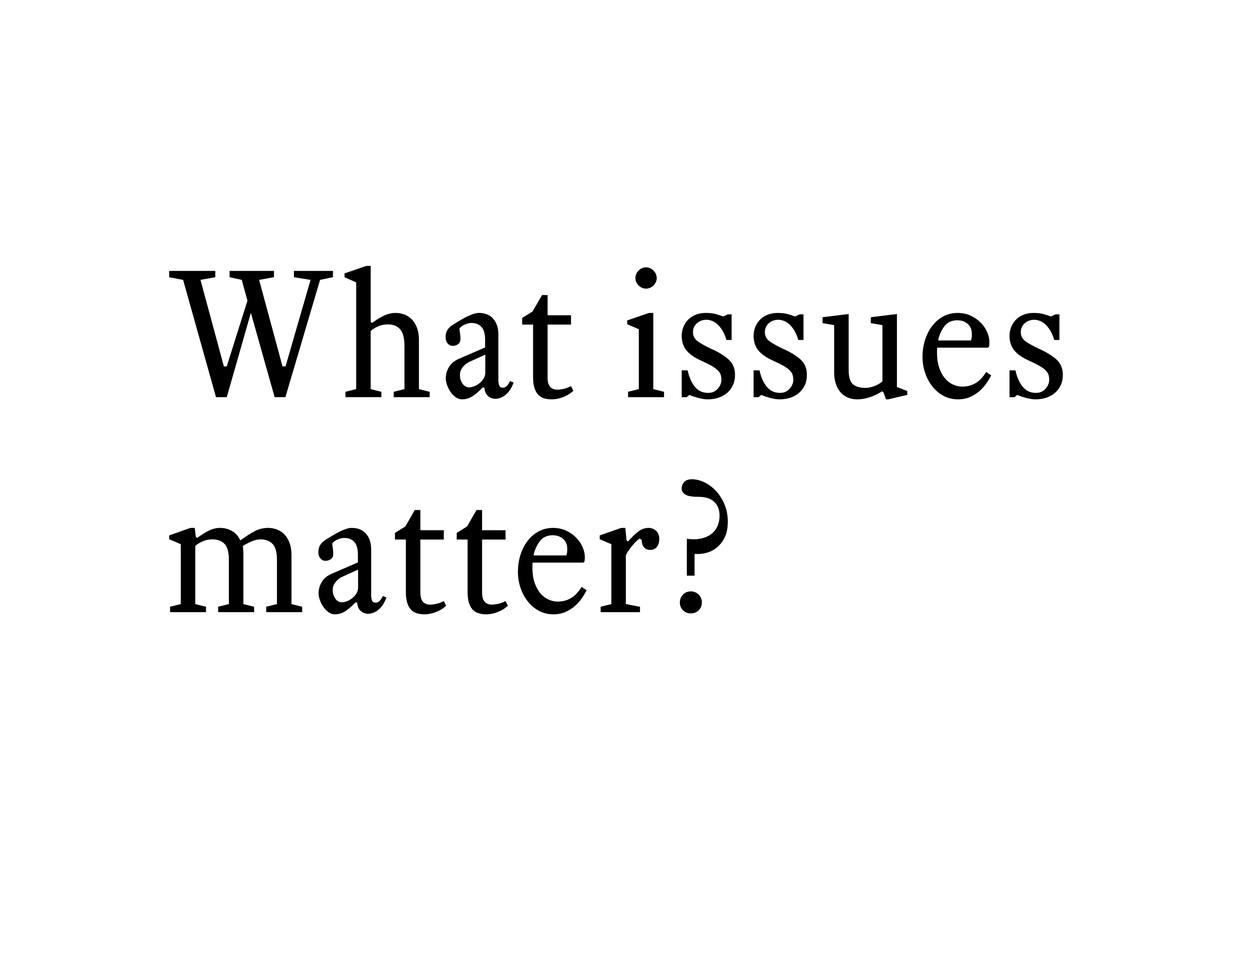
<style>
.page{position:relative;width:1242px;height:960px;background:#ffffff}
.page>*{position:absolute;margin:0}
.t1{font:178.8px/214.9px "EquityTextB";letter-spacing:0.025em;color:#000000}
</style>
<div class="page">
<p class="t1" style="left:169px;top:266px;width:894px;height:348px">What issues<br>matter?</p>
</div>
